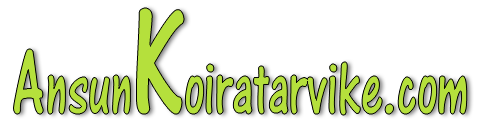
<style>
.page{position:relative;width:483px;height:128px;background:#ffffff}
.page>*{position:absolute;margin:0}
.t1{font:78.8px "ARCENA";color:#b5e03c;scale:0.68 1}
.t2{font:98.5px "ARCENA";color:#b5e03c;scale:0.68 1}
.t3{font:157.5px "ARCENA";color:#b5e03c;scale:0.68 1}
</style>
<div class="page">
<p class="t1" style="left:13px;top:8px;width:454px;height:107px"><span class="t2">A</span>nsun<span class="t3">K</span>oiratarvike.com</p>
</div>
